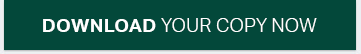
<style>
.page{position:relative;width:361px;height:54px;background:#03483a}
.page>*{position:absolute;margin:0}
.t1{font:19.3px "AktivGrotesk-Light";letter-spacing:0.005em;color:#ffffff}
.t2{font:19.3px "AktivGrotesk-Bold";letter-spacing:0.005em;color:#ffffff}
</style>
<div class="page">
<p class="t1" style="left:43px;top:18px;width:274px;height:14px"><span class="t2">DOWNLOAD </span>YOUR COPY NOW</p>
</div>
